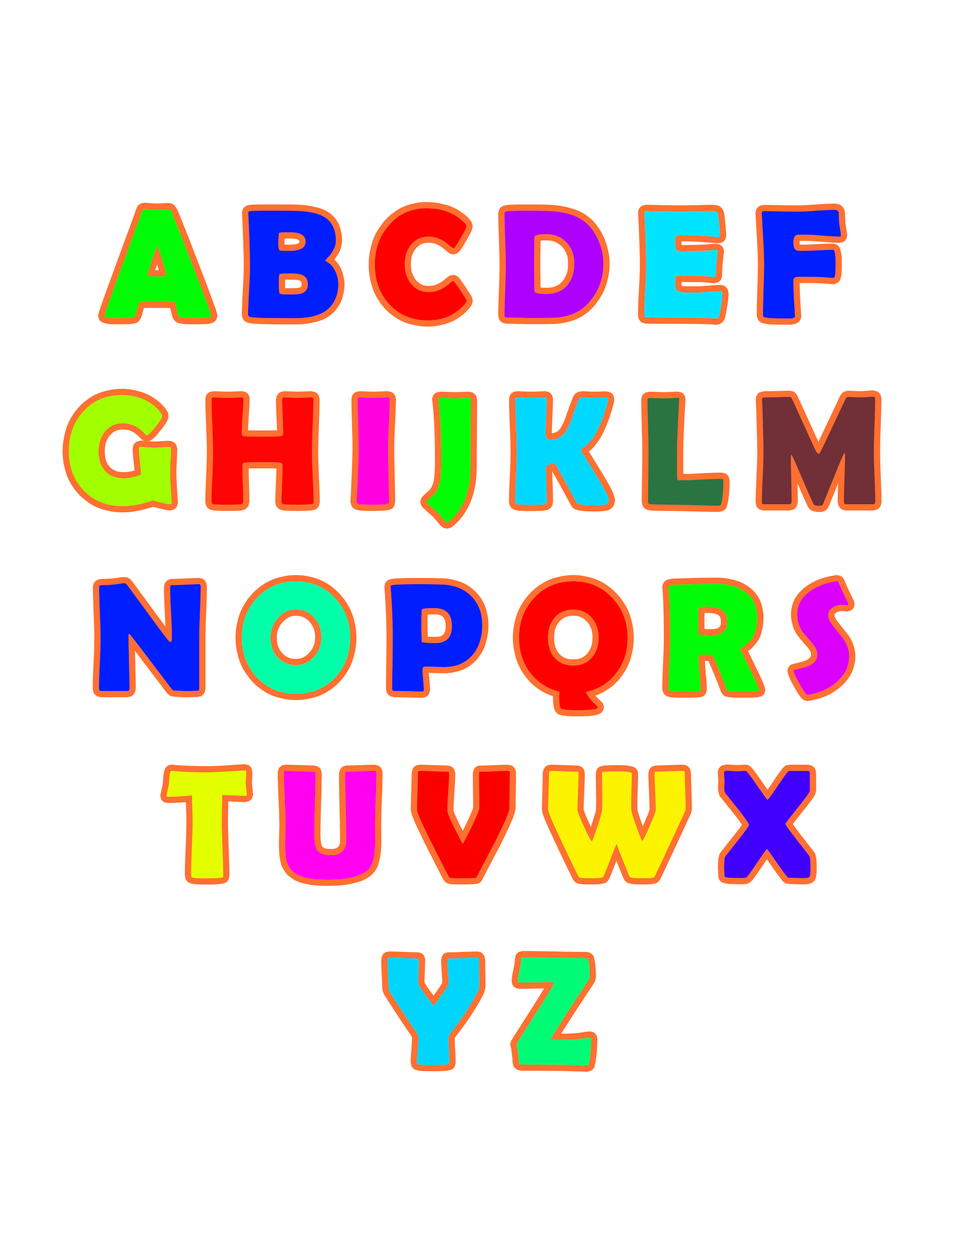
<style>
.page{position:relative;width:958px;height:1245px;background:#ffffff}
.page>*{position:absolute;margin:0}
.t1{font:155.6px "BerlinSansFBDemi-Bold";letter-spacing:-0.03em;color:#00fc06}
.t2{font:155.6px "BerlinSansFBDemi-Bold";letter-spacing:-0.03em;color:#001eff}
.t3{font:155.6px "BerlinSansFBDemi-Bold";letter-spacing:-0.03em;color:#ff0000}
.t4{font:155.6px "BerlinSansFBDemi-Bold";letter-spacing:-0.03em;color:#ae00ff}
.t5{font:155.6px "BerlinSansFBDemi-Bold";letter-spacing:-0.03em;color:#00e4ff}
.t6{font:155.6px "BerlinSansFBDemi-Bold";letter-spacing:-0.03em;color:#a2ff00}
.t7{font:155.6px "BerlinSansFBDemi-Bold";letter-spacing:-0.03em;color:#ff0404}
.t8{font:155.6px "BerlinSansFBDemi-Bold";letter-spacing:-0.03em;color:#ff00de}
.t9{font:155.6px "BerlinSansFBDemi-Bold";letter-spacing:-0.03em;color:#00ff06}
.t10{font:155.6px "BerlinSansFBDemi-Bold";letter-spacing:-0.03em;color:#00d8ff}
.t11{font:155.6px "BerlinSansFBDemi-Bold";letter-spacing:-0.03em;color:#2a7442}
.t12{font:155.6px "BerlinSansFBDemi-Bold";letter-spacing:-0.03em;color:#712f37}
.t13{font:155.6px "BerlinSansFBDemi-Bold";letter-spacing:-0.03em;color:#00ffa8}
.t14{font:155.6px "BerlinSansFBDemi-Bold";letter-spacing:-0.03em;color:#db00fc}
.t15{font:155.6px "BerlinSansFBDemi-Bold";letter-spacing:-0.03em;color:#e4ff00}
.t16{font:155.6px "BerlinSansFBDemi-Bold";letter-spacing:-0.03em;color:#ff00f0}
.t17{font:155.6px "BerlinSansFBDemi-Bold";letter-spacing:-0.03em;color:#fc0000}
.t18{font:155.6px "BerlinSansFBDemi-Bold";letter-spacing:-0.03em;color:#fcf300}
.t19{font:155.6px "BerlinSansFBDemi-Bold";letter-spacing:-0.03em;color:#4100fc}
.t20{font:155.6px "BerlinSansFBDemi-Bold";letter-spacing:-0.03em;color:#00d5fc}
.t21{font:155.6px "BerlinSansFBDemi-Bold";letter-spacing:-0.03em;color:#00fc77}
</style>
<div class="page">
<p class="t1" style="left:68px;top:208px;width:807px;height:857px;text-align:center">A <span class="t2">B </span><span class="t3">C </span><span class="t4">D </span><span class="t5">E</span><span class="t2"> F <br></span><span class="t6">G </span><span class="t7">H</span><span class="t8"> I</span><span class="t9"> J </span><span class="t10">K</span><span class="t11"> L </span><span class="t12">M</span><span class="t2"> <br>N </span><span class="t13">O</span><span class="t2"> P </span><span class="t3">Q</span> R<span class="t14"> S</span> <br><span class="t15">T </span><span class="t16">U </span><span class="t17">V </span><span class="t18">W </span><span class="t19">X<br></span><span class="t20">Y </span><span class="t21">Z</span></p>
</div>
